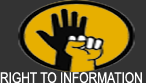
<style>
.page{position:relative;width:146px;height:83px;background:#333333}
.page>*{position:absolute;margin:0}
.t1{font:14.8px "ArialMT";color:#ffffff;text-transform:uppercase;scale:0.81 1}
</style>
<div class="page">
<p class="t1" style="left:0px;top:72px;width:142px;height:12px">right to information</p>
</div>
